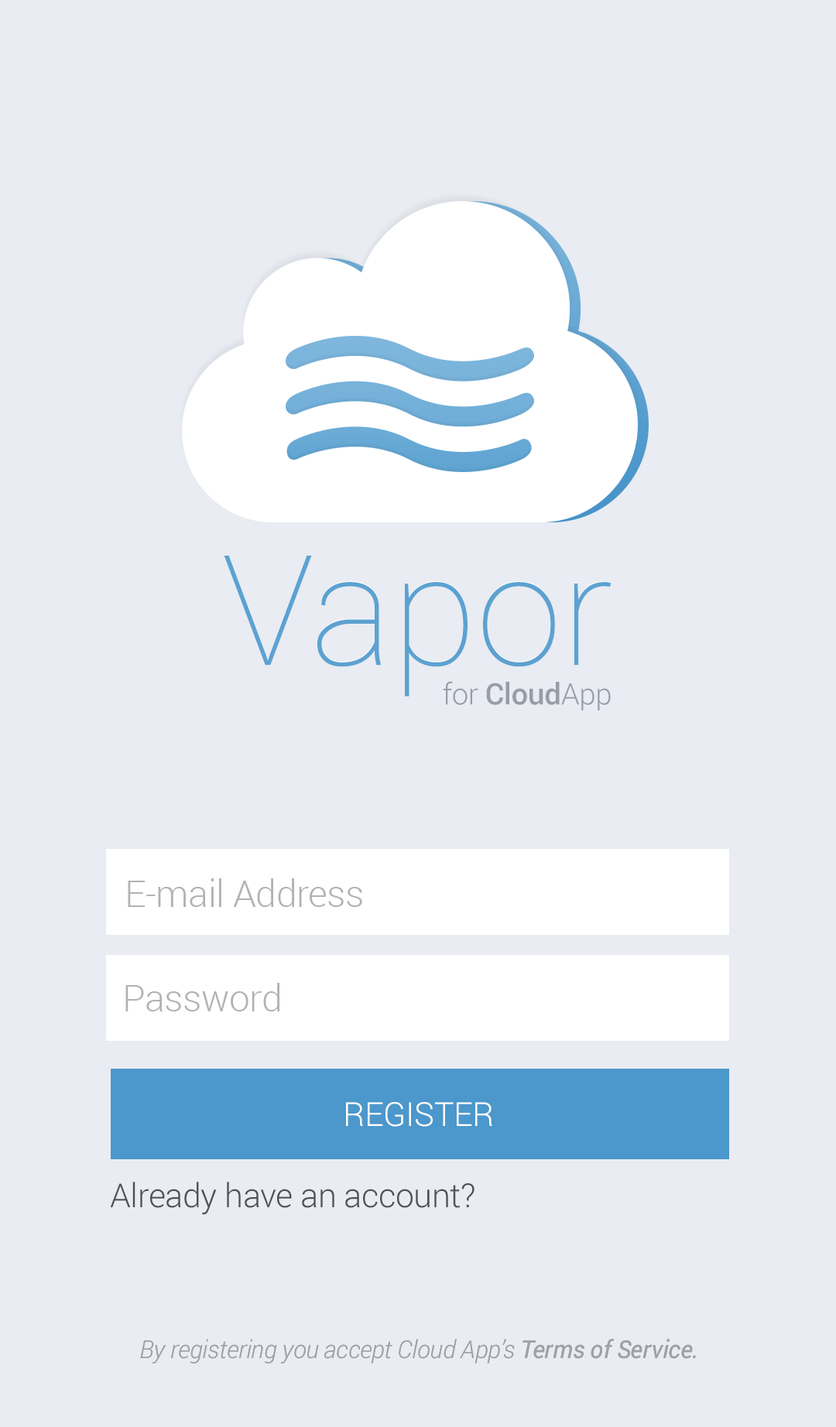
<style>
.page{position:relative;width:836px;height:1427px;background:#e9ecf2}
.page>*{position:absolute;margin:0}
.t1{font:153.9px "Roboto-Thin";color:#5ca2d1}
.t2{font:29.7px "Roboto-Medium";letter-spacing:-0.01em;color:#979da6}
.t3{font:29.7px "Roboto-Light";letter-spacing:-0.01em;color:#979da6}
.t4{font:37.1px "Roboto-Light";letter-spacing:-0.01em;color:#b2b2b2}
.t5{font:33.3px "Roboto-Light";letter-spacing:-0.01em;color:#ffffff}
.t6{font:33.3px "Roboto-Light";letter-spacing:-0.01em;color:#515151}
.t7{font:24.8px "Roboto-LightItalic";letter-spacing:-0.01em;color:#9fa1a3}
.t8{font:24.8px "Roboto-Italic";letter-spacing:-0.01em;color:#9fa1a3}
</style>
<div class="page">
<p class="t1" style="left:224px;top:555px;width:387px;height:141px">Vapor</p>
<p class="t2" style="left:443px;top:681px;width:168px;height:29px"><span class="t3">for</span> Cloud<span class="t3">App</span></p>
<p class="t4" style="left:128px;top:878px;width:234px;height:29px">E-mail Address</p>
<p class="t4" style="left:125px;top:983px;width:154px;height:28px">Password</p>
<p class="t5" style="left:346px;top:1102px;width:146px;height:25px">REGISTER</p>
<p class="t6" style="left:110px;top:1182px;width:364px;height:33px">Already have an account?</p>
<p class="t7" style="left:140px;top:1339px;width:556px;height:24px">By registering you accept Cloud App’s <span class="t8">Terms of Service.</span></p>
<p class="t7" style="left:140px;top:1339px;width:556px;height:24px">By registering you accept Cloud App’s <span class="t8">Terms of Service.</span></p>
</div>
